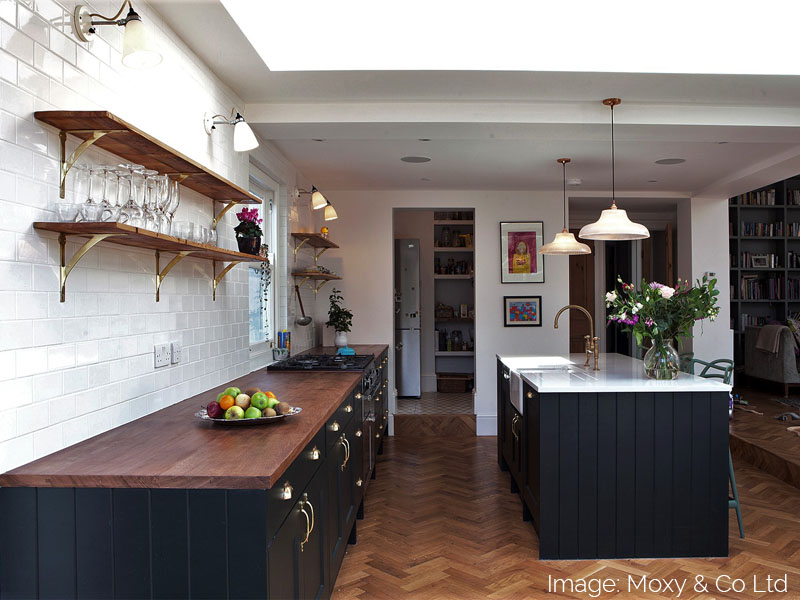
<style>
.page{position:relative;width:800px;height:600px}
.page>*{position:absolute;margin:0}
.t1{font:24px "Raleway-Light";color:#ffffff}
</style>
<div class="page">
<p class="t1" style="left:549px;top:574px;width:238px;height:23px">Image: Moxy &amp; Co Ltd</p>
</div>
